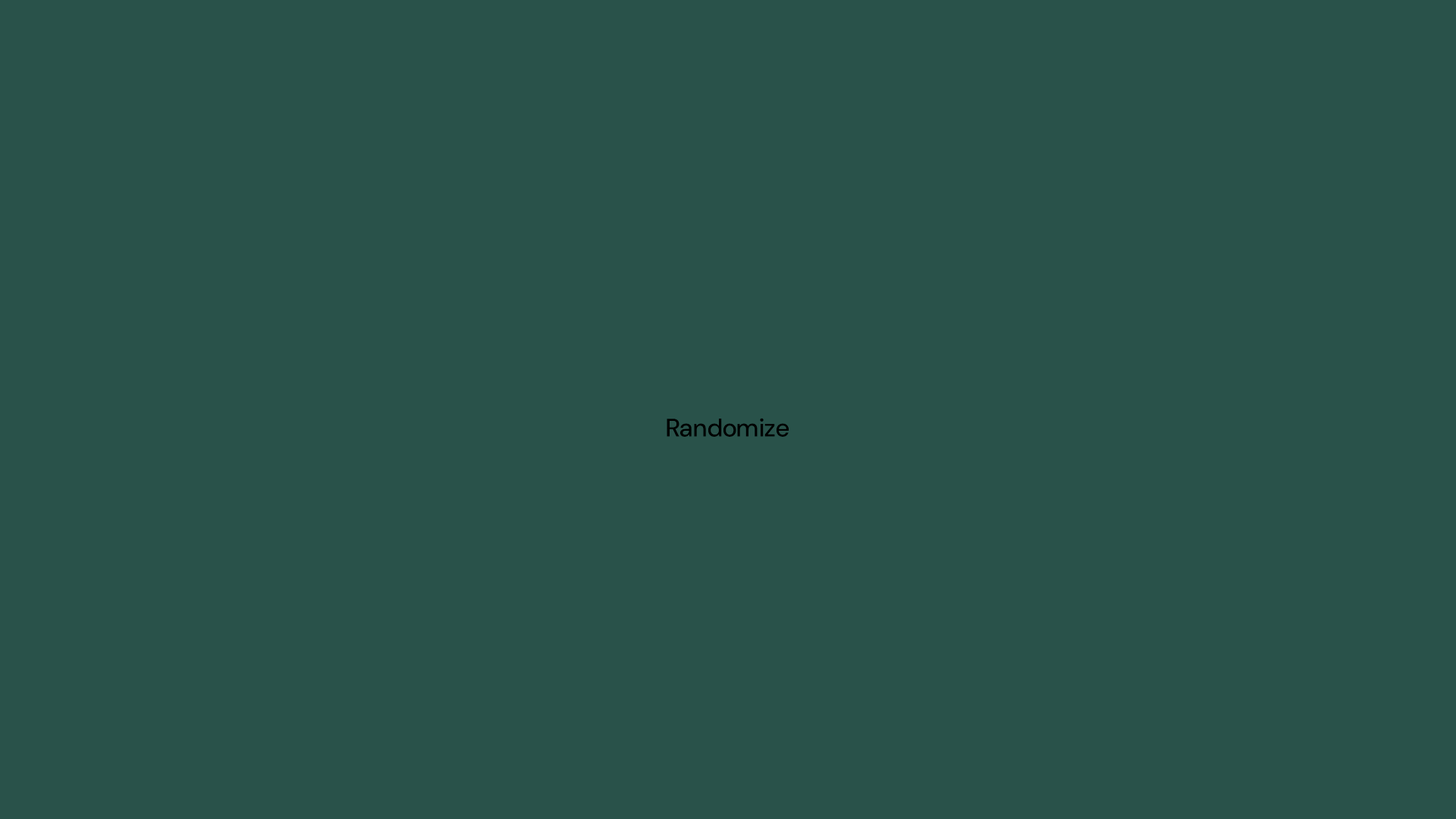
<style>
.page{position:relative;width:1456px;height:819px;background:#29524a}
.page>*{position:absolute;margin:0}
.t1{font:25.3px "DMSans_34.000opsz_488.000wght";color:#000000}
</style>
<div class="page">
<p class="t1" style="left:667px;top:419px;width:12px;height:18px">R</p>
<p class="t1" style="left:680px;top:423px;width:12px;height:14px">a</p>
<p class="t1" style="left:694px;top:423px;width:12px;height:14px">n</p>
<p class="t1" style="left:708px;top:419px;width:14px;height:18px">d</p>
<p class="t1" style="left:723px;top:423px;width:13px;height:14px">o</p>
<p class="t1" style="left:737px;top:423px;width:21px;height:14px">m</p>
<p class="t1" style="left:760px;top:418px;width:4px;height:19px">i</p>
<p class="t1" style="left:764px;top:424px;width:11px;height:13px">z</p>
<p class="t1" style="left:777px;top:423px;width:12px;height:14px">e</p>
</div>
